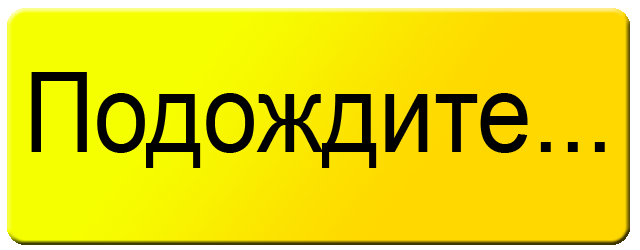
<style>
.page{position:relative;width:640px;height:250px;background:#ffd800}
.page>*{position:absolute;margin:0}
.t1{font:110.6px "ArialMT";color:#000000;scale:0.88 1}
</style>
<div class="page">
<p class="t1" style="left:31px;top:72px;width:574px;height:96px">Подождите...</p>
</div>
